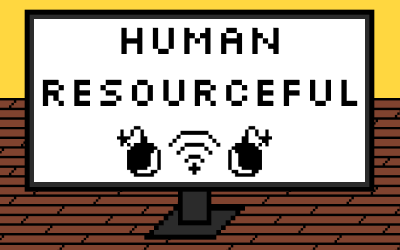
<style>
.page{position:relative;width:400px;height:250px;background:#ffffff}
.page>*{position:absolute;margin:0}
.t1{font:44px "Silkscreen";color:#000000}
</style>
<div class="page">
<p class="t1" style="left:42px;top:27px;width:316px;height:79px;text-align:center">HUMAN<br>RESOURCEFUL</p>
</div>
